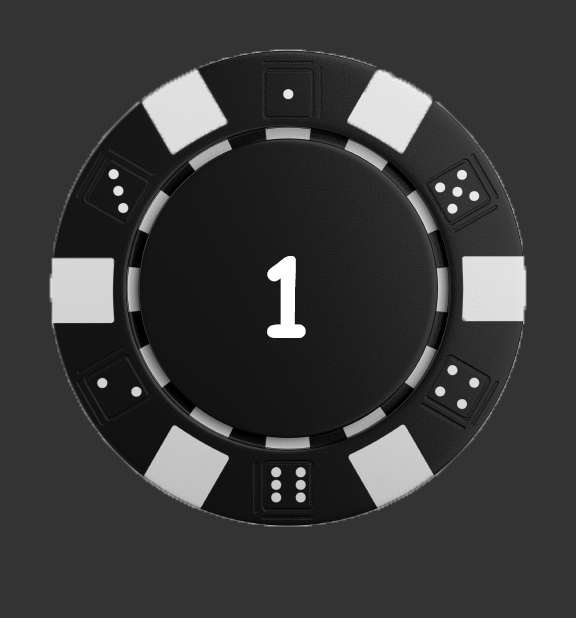
<style>
.page{position:relative;width:576px;height:618px;background:#333333}
.page>*{position:absolute;margin:0}
.t1{font:107.8px "ComicSansMS-Bold";color:#ffffff}
</style>
<div class="page">
<p class="t1" style="left:267px;top:256px;width:39px;height:82px">1</p>
</div>
